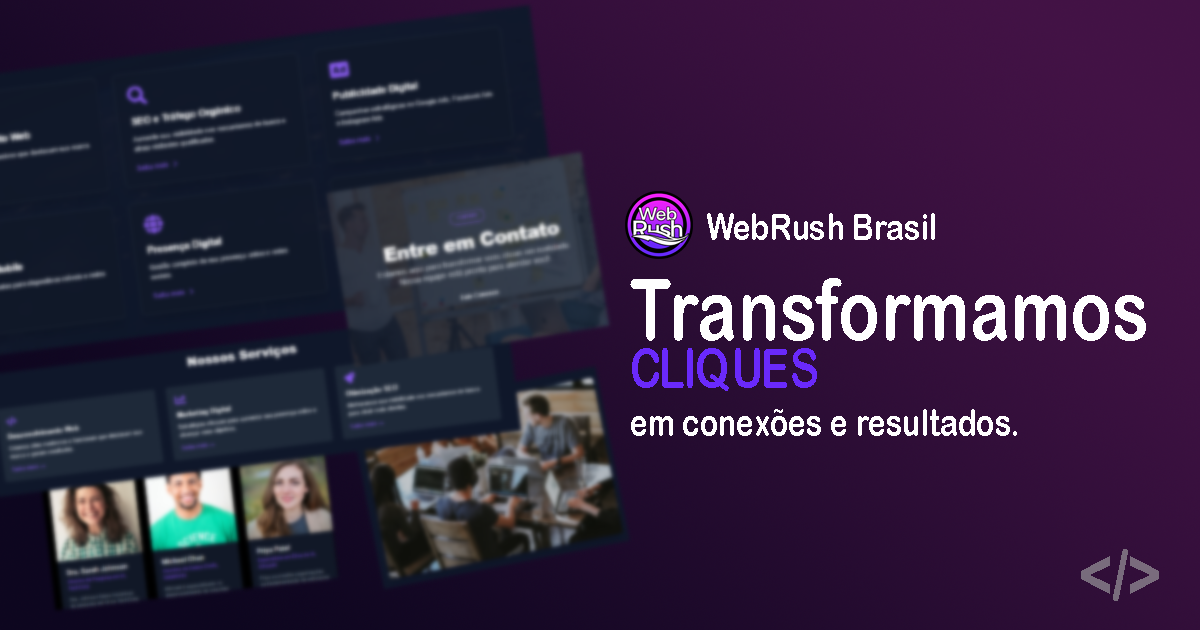
<style>
.page{position:relative;width:1200px;height:630px}
.page>*{position:absolute;margin:0}
.t1{font:37.2px "ArialRoundedMTBold";letter-spacing:0.005em;color:#ffffff;scale:0.81 1}
.t2{font:37.8px/48px "ArialRoundedMTBold";letter-spacing:0.005em;color:#ffffff;scale:0.79 1}
.t3{font:84.8px/48px "ArialRoundedMTBold";letter-spacing:0.005em;color:#ffffff;scale:0.79 1}
.t4{font:54.8px/48px "ArialRoundedMTBold";letter-spacing:0.005em;color:#6a29fb;scale:0.79 1}
.t5{font:70.1px "ArialRoundedMTBold";letter-spacing:0.005em;color:#796c7d;scale:0.84 1}
</style>
<div class="page">
<p class="t1" style="left:707px;top:213px;width:228px;height:27px">WebRush Brasil</p>
<p class="t2" style="left:630px;top:278px;width:516px;height:158px"><span class="t3">Transformamos<br></span><span class="t4">CLIQUES<br></span>em conexões e resultados.</p>
<p class="t5" style="left:1081px;top:549px;width:78px;height:52px">&lt;/&gt;</p>
</div>
